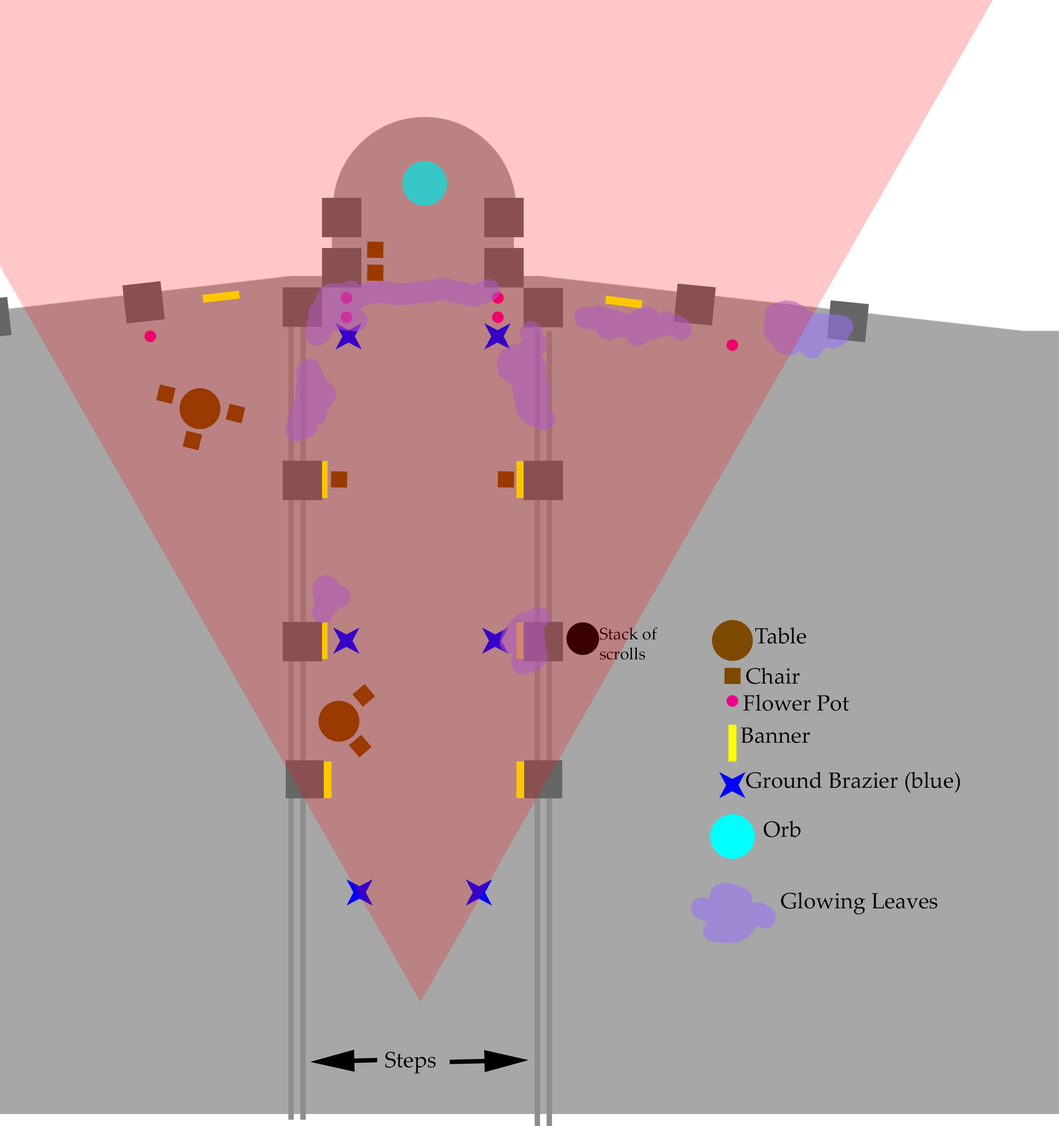
<style>
.page{position:relative;width:1059px;height:1126px;background:#a7a7a7}
.page>*{position:absolute;margin:0}
.t1{font:16.6px "PalatinoLinotype-Roman"}
.t2{font:22.1px "PalatinoLinotype-Roman";color:#000000}
</style>
<div class="page">
<p class="t1" style="left:600px;top:628px;width:57px;height:32px">Stack of scrolls</p>
<p class="t2" style="left:755px;top:627px;width:51px;height:17px">Table</p>
<p class="t2" style="left:746px;top:667px;width:54px;height:17px">Chair</p>
<p class="t2" style="left:743px;top:694px;width:106px;height:17px">Flower Pot</p>
<p class="t2" style="left:741px;top:727px;width:69px;height:16px">Banner</p>
<p class="t2" style="left:746px;top:771px;width:214px;height:22px">Ground Brazier (blue)</p>
<p class="t2" style="left:764px;top:820px;width:37px;height:17px">Orb</p>
<p class="t2" style="left:781px;top:892px;width:157px;height:23px">Glowing Leaves</p>
<p class="t2" style="left:385px;top:1051px;width:51px;height:23px">Steps</p>
</div>
